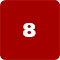
<style>
.page{position:relative;width:60px;height:60px;background:#a50000}
.page>*{position:absolute;margin:0}
.t1{font:20.8px "Rockwell-ExtraBold";color:#ffffff}
</style>
<div class="page">
<p class="t1" style="left:23px;top:23px;width:13px;height:14px">8</p>
</div>
